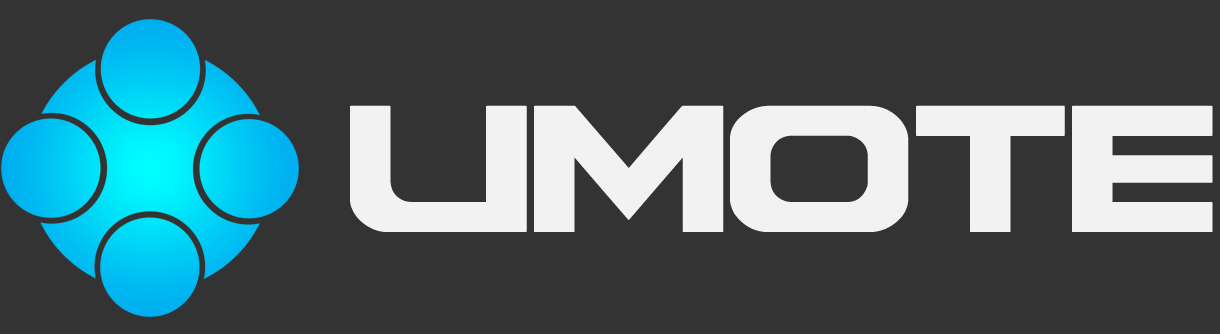
<style>
.page{position:relative;width:1220px;height:334px;background:#333333}
.page>*{position:absolute;margin:0}
.t1{font:150px "Astera";color:#f2f2f2}
</style>
<div class="page">
<p class="t1" style="left:350px;top:105px;width:863px;height:127px">uMOTE</p>
</div>
